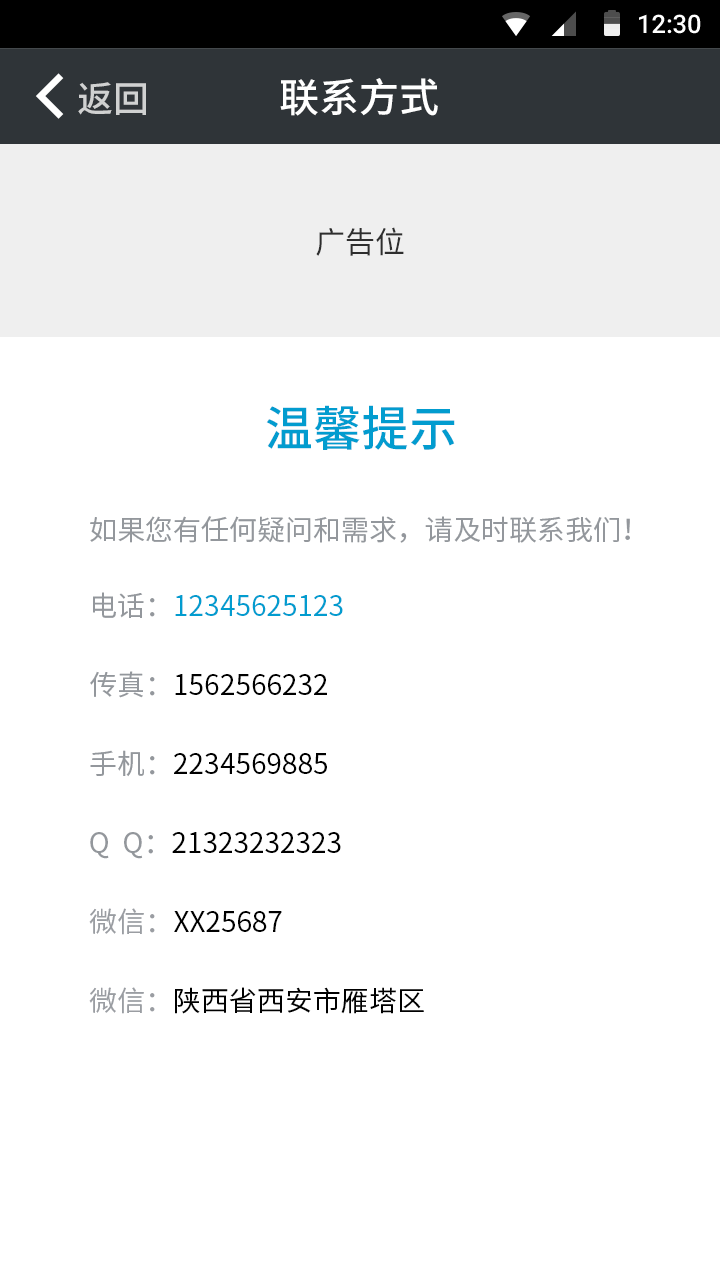
<style>
.page{position:relative;width:720px;height:1280px;background:#ffffff}
.page>*{position:absolute;margin:0}
.t1{font:25.4px "Roboto-Medium";color:#ffffff}
.t2{font:40px "SourceHanSansCN-Medium";color:#ffffff}
.t3{font:36px "SourceHanSansCN-Medium";color:#d0d1d1}
.t4{font:30px "SourceHanSansCN-Regular";color:#2e2e2e}
.t5{font:48px "SourceHanSansCN-Medium";color:#029ccf}
.t6{font:28px "SourceHanSansCN-Regular";color:#93979c}
.t7{font:28px/79px "SourceHanSansCN-Regular";color:#029ccf}
.t8{font:28px/79px "SourceHanSansCN-Regular";color:#93979c}
.t9{font:28px/79px "SourceHanSansCN-Regular";color:#000000}
.t10{font:28px/79px "SourceHanSansCN-Regular";color:#9a9da2}
</style>
<div class="page">
<p class="t1" style="left:639px;top:14px;width:62px;height:20px">12:30</p>
<p class="t2" style="left:280px;top:78px;width:158px;height:38px">联系方式</p>
<p class="t3" style="left:78px;top:82px;width:68px;height:33px">返回</p>
<p class="t4" style="left:316px;top:227px;width:88px;height:29px">广告位</p>
<p class="t5" style="left:266px;top:405px;width:189px;height:45px">温馨提示</p>
<p class="t6" style="left:90px;top:516px;width:540px;height:27px">如果您有任何疑问和需求，请及时联系我们！</p>
<p class="t7" style="left:89px;top:592px;width:335px;height:422px"><span class="t8">电话：</span>12345625123<br><span class="t8">传真：</span><span class="t9">1562566232<br></span><span class="t8">手机：</span><span class="t9">2234569885<br></span><span class="t8">Q  Q：</span><span class="t9">21323232323<br></span><span class="t10">微信：</span><span class="t9">XX25687<br></span><span class="t10">微信：</span><span class="t9">陕西省西安市雁塔区</span></p>
</div>
